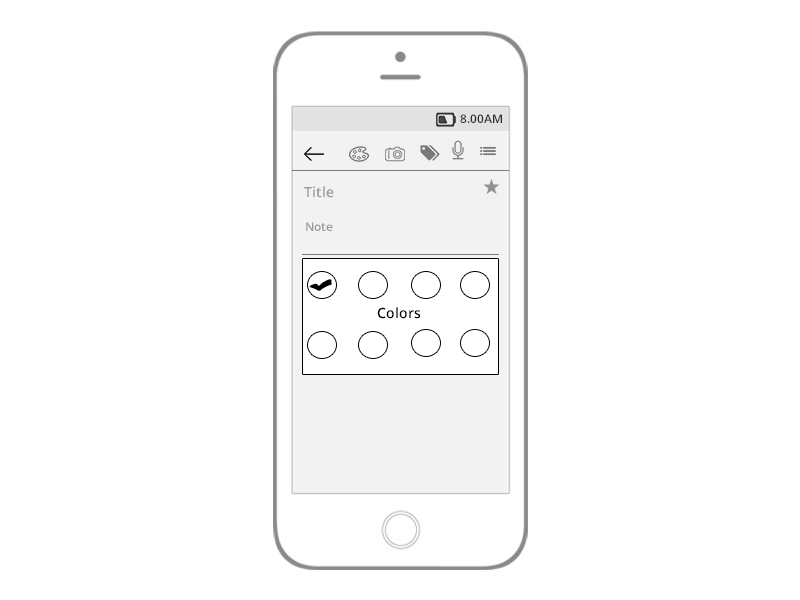
<style>
.page{position:relative;width:800px;height:600px;background:#ffffff}
.page>*{position:absolute;margin:0}
.t1{font:12px "OpenSans-Semibold";color:#2e2d2d}
.t2{font:14px "OpenSans-Semibold";color:#9a9a9a}
.t3{font:12px "OpenSans-Semibold";color:#9a9a9a}
.t4{font:14px "OpenSans-Semibold";color:#000000}
</style>
<div class="page">
<p class="t1" style="left:460px;top:114px;width:42px;height:9px">8.00AM</p>
<p class="t2" style="left:304px;top:186px;width:30px;height:12px">Title</p>
<p class="t3" style="left:306px;top:222px;width:27px;height:9px">Note</p>
<p class="t4" style="left:377px;top:307px;width:44px;height:12px">Colors</p>
</div>
